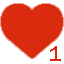
<style>
.page{position:relative;width:64px;height:64px;background:#da2b0f}
.page>*{position:absolute;margin:0}
.t1{font:22.2px "FranklinGothic-Medium";color:#da2b0f}
</style>
<div class="page">
<p class="t1" style="left:50px;top:46px;width:11px;height:15px">1</p>
</div>
